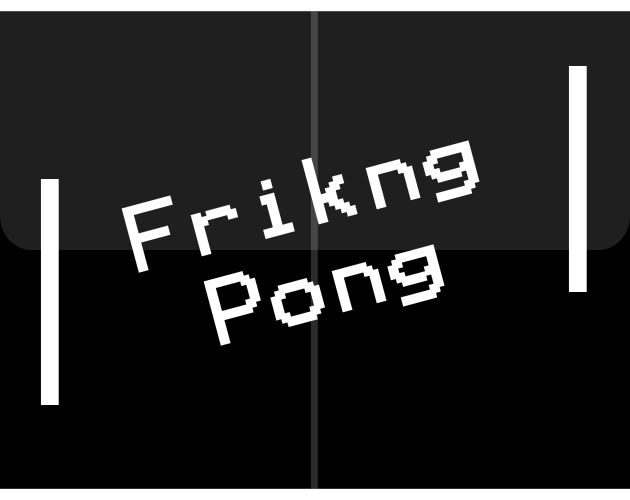
<style>
.page{position:relative;width:630px;height:500px;background:#000000}
.page>*{position:absolute;margin:0}
.t1{font:76px "Terminal";color:#ffffff;scale:1.06 1}
</style>
<div class="page">
<p class="t1" style="left:121px;top:140px;width:359px;height:206px;text-align:center;rotate:-15deg">Frikng<br>Pong</p>
</div>
